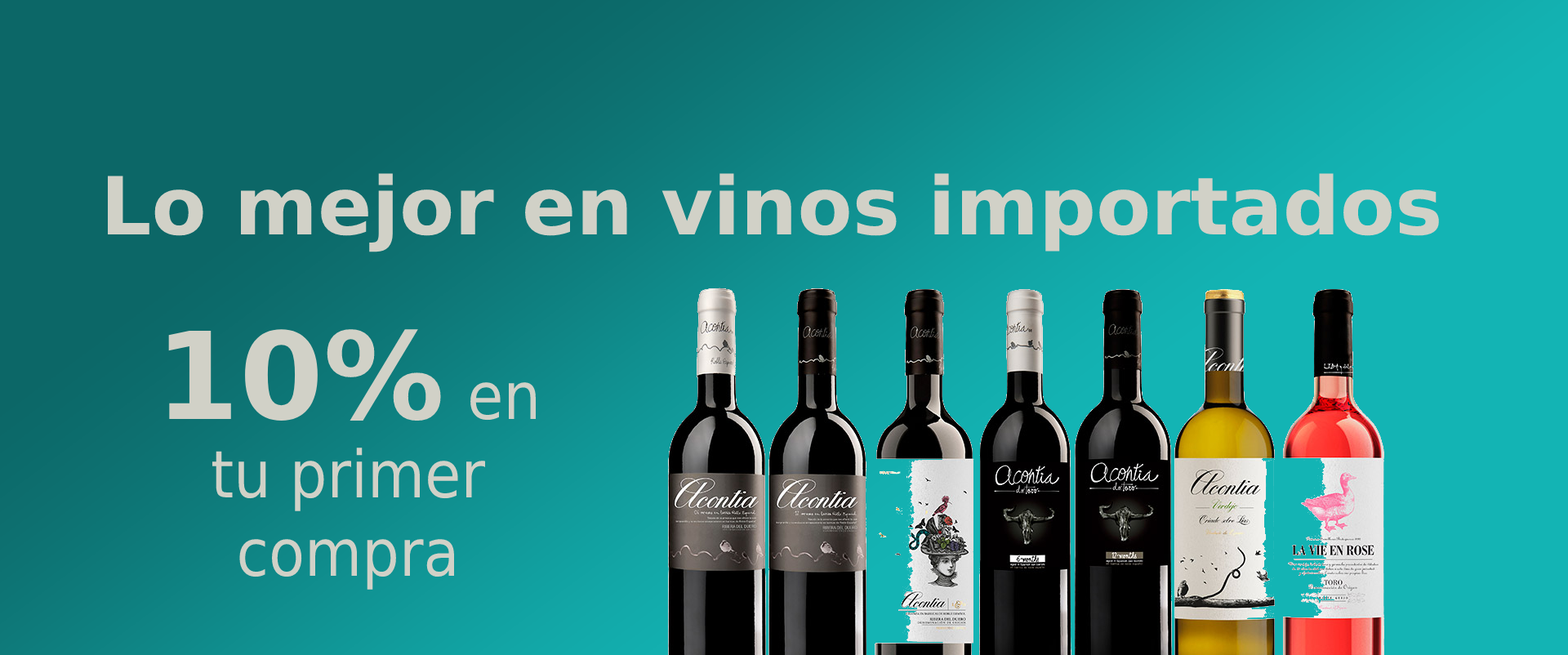
<style>
.page{position:relative;width:1568px;height:655px}
.page>*{position:absolute;margin:0}
.t1{font:80px "DejaVuSans-Bold";color:#d1d1c7}
.t2{font:65.3px "DejaVuSansCondensed";color:#d1d1c7}
.t3{font:120.9px "DejaVuSans-Bold";color:#d1d1c7}
</style>
<div class="page">
<p class="t1" style="left:107px;top:173px;width:1332px;height:79px">Lo mejor en vinos importados</p>
<p class="t2" style="left:168px;top:329px;width:368px;height:261px;text-align:center"><span class="t3">10% </span>en<br>tu primer compra</p>
</div>
